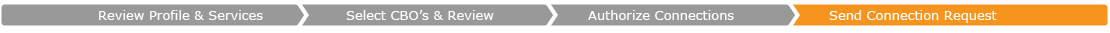
<style>
.page{position:relative;width:1110px;height:33px;background:#ffffff}
.page>*{position:absolute;margin:0}
.t1{font:13px "Verdana";color:#ffffff}
</style>
<div class="page">
<p class="t1" style="left:99px;top:10px;width:164px;height:10px">Review Profile &amp; Services</p>
<p class="t1" style="left:346px;top:10px;width:148px;height:10px">Select CBO’s &amp; Review</p>
<p class="t1" style="left:588px;top:10px;width:146px;height:10px">Authorize Connections</p>
<p class="t1" style="left:829px;top:10px;width:168px;height:13px">Send Connection Request</p>
</div>
